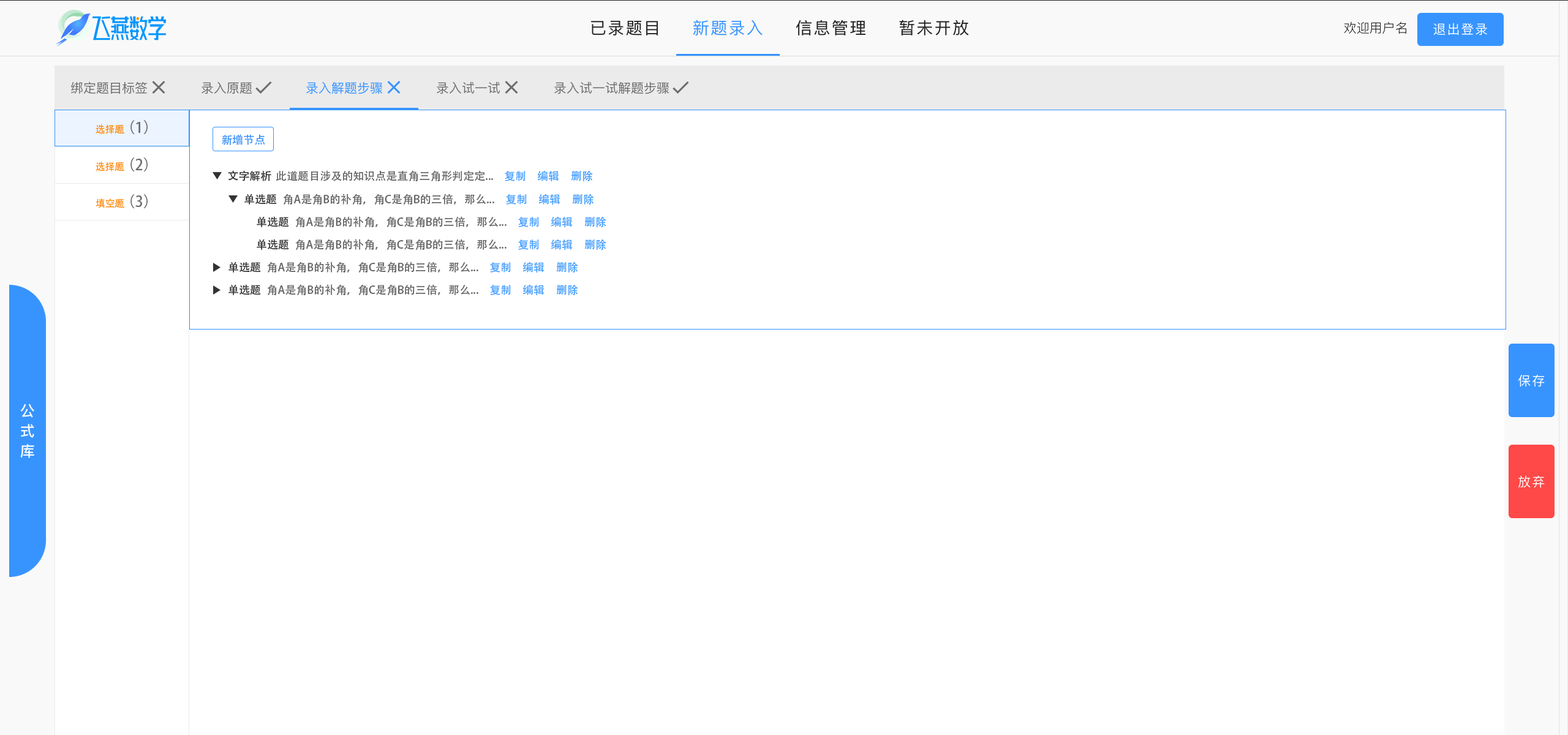
<style>
.page{position:relative;width:1568px;height:735px;background:#ffffff}
.page>*{position:absolute;margin:0}
.t1{font:9.8px "AdobeHeitiStd-Regular";color:#fe8e05}
.t2{font:14.7px "AdobeHeitiStd-Regular";color:#6c6c6c}
.t3{font:11px "AdobeHeitiStd-Regular";color:#3794ff}
.t4{font:11px "AdobeHeitiStd-Regular";color:#333333}
.t5{font:11px "AdobeHeitiStd-Regular";color:#666666}
.t6{font:11px "AdobeHeitiStd-Regular";color:#409eff}
</style>
<div class="page">
<p class="t1" style="left:96px;top:124px;width:28px;height:10px">选择题</p>
<p class="t2" style="left:130px;top:120px;width:18px;height:14px">（1）</p>
<p class="t3" style="left:222px;top:134px;width:43px;height:11px">新增节点</p>
<p class="t1" style="left:96px;top:162px;width:28px;height:10px">选择题</p>
<p class="t2" style="left:130px;top:157px;width:18px;height:15px">（2）</p>
<p class="t4" style="left:228px;top:170px;width:43px;height:11px">文字解析</p>
<p class="t5" style="left:276px;top:170px;width:217px;height:11px">此道题目涉及的知识点是直角三角形判定定...</p>
<p class="t6" style="left:505px;top:171px;width:21px;height:10px">复制</p>
<p class="t6" style="left:537px;top:170px;width:22px;height:11px">编辑</p>
<p class="t6" style="left:571px;top:171px;width:22px;height:10px">删除</p>
<p class="t2" style="left:130px;top:194px;width:18px;height:14px">（3）</p>
<p class="t4" style="left:244px;top:194px;width:33px;height:11px">单选题</p>
<p class="t5" style="left:283px;top:194px;width:211px;height:11px">角A是角B的补角，角C是角B的三倍，那么...</p>
<p class="t6" style="left:506px;top:194px;width:21px;height:11px">复制</p>
<p class="t6" style="left:538px;top:194px;width:22px;height:11px">编辑</p>
<p class="t6" style="left:572px;top:194px;width:22px;height:11px">删除</p>
<p class="t1" style="left:96px;top:198px;width:28px;height:10px">填空题</p>
<p class="t4" style="left:257px;top:216px;width:32px;height:11px">单选题</p>
<p class="t5" style="left:295px;top:216px;width:212px;height:11px">角A是角B的补角，角C是角B的三倍，那么...</p>
<p class="t6" style="left:518px;top:217px;width:21px;height:10px">复制</p>
<p class="t6" style="left:551px;top:216px;width:22px;height:11px">编辑</p>
<p class="t6" style="left:584px;top:217px;width:22px;height:10px">删除</p>
<p class="t4" style="left:257px;top:239px;width:32px;height:11px">单选题</p>
<p class="t5" style="left:295px;top:239px;width:212px;height:11px">角A是角B的补角，角C是角B的三倍，那么...</p>
<p class="t6" style="left:518px;top:239px;width:21px;height:11px">复制</p>
<p class="t6" style="left:551px;top:239px;width:22px;height:11px">编辑</p>
<p class="t6" style="left:584px;top:239px;width:22px;height:11px">删除</p>
<p class="t4" style="left:228px;top:262px;width:33px;height:11px">单选题</p>
<p class="t5" style="left:267px;top:262px;width:211px;height:11px">角A是角B的补角，角C是角B的三倍，那么...</p>
<p class="t6" style="left:490px;top:262px;width:21px;height:11px">复制</p>
<p class="t6" style="left:522px;top:262px;width:23px;height:11px">编辑</p>
<p class="t6" style="left:556px;top:262px;width:22px;height:11px">删除</p>
<p class="t4" style="left:228px;top:284px;width:33px;height:11px">单选题</p>
<p class="t5" style="left:267px;top:284px;width:211px;height:11px">角A是角B的补角，角C是角B的三倍，那么...</p>
<p class="t6" style="left:490px;top:285px;width:21px;height:10px">复制</p>
<p class="t6" style="left:522px;top:284px;width:23px;height:11px">编辑</p>
<p class="t6" style="left:556px;top:285px;width:22px;height:10px">删除</p>
</div>
